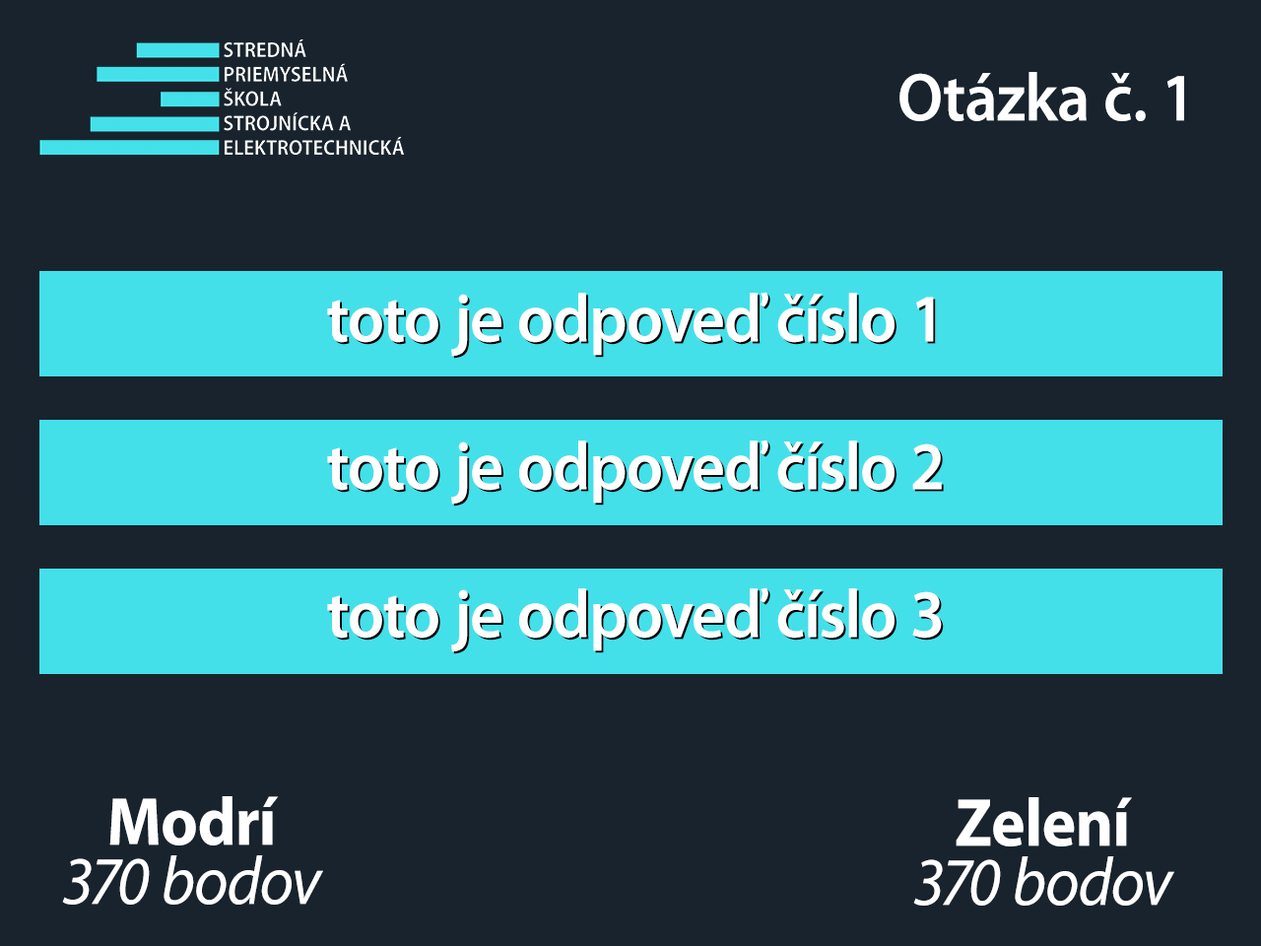
<style>
.page{position:relative;width:1261px;height:946px;background:#18232d}
.page>*{position:absolute;margin:0}
.t1{font:68.3px "MyriadPro-Semibold";color:#ffffff;scale:0.95 1}
.t2{font:68.3px "MyriadPro-Bold";color:#ffffff;scale:0.95 1}
.t3{font:68.3px "MyriadPro-It";color:#ffffff;scale:0.95 1}
</style>
<div class="page">
<p class="t1" style="left:899px;top:72px;width:285px;height:49px">Otázka č. 1</p>
<p class="t1" style="left:327px;top:292px;width:607px;height:65px">toto je odpoveď číslo 1</p>
<p class="t1" style="left:329px;top:294px;width:607px;height:65px">toto je odpoveď číslo 1</p>
<p class="t1" style="left:327px;top:439px;width:615px;height:65px">toto je odpoveď číslo 2</p>
<p class="t1" style="left:329px;top:441px;width:615px;height:65px">toto je odpoveď číslo 2</p>
<p class="t1" style="left:327px;top:587px;width:615px;height:65px">toto je odpoveď číslo 3</p>
<p class="t1" style="left:329px;top:589px;width:615px;height:65px">toto je odpoveď číslo 3</p>
<p class="t2" style="left:109px;top:796px;width:170px;height:49px">Modrí</p>
<p class="t2" style="left:956px;top:797px;width:176px;height:49px">Zelení</p>
<p class="t3" style="left:62px;top:855px;width:261px;height:49px">370 bodov</p>
<p class="t3" style="left:913px;top:856px;width:261px;height:49px">370 bodov</p>
</div>
